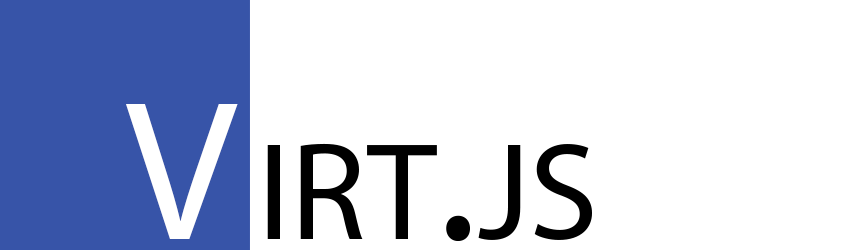
<style>
.page{position:relative;width:850px;height:250px;background:#ffffff}
.page>*{position:absolute;margin:0}
.t1{font:200px "MyriadPro-Regular";color:#000000;font-variant:small-caps}
.t2{font:200px "MyriadPro-Regular";letter-spacing:0.1em;color:#ffffff;text-transform:uppercase}
</style>
<div class="page">
<p class="t1" style="left:126px;top:104px;width:466px;height:137px"><span class="t2">v</span>irt.js</p>
</div>
